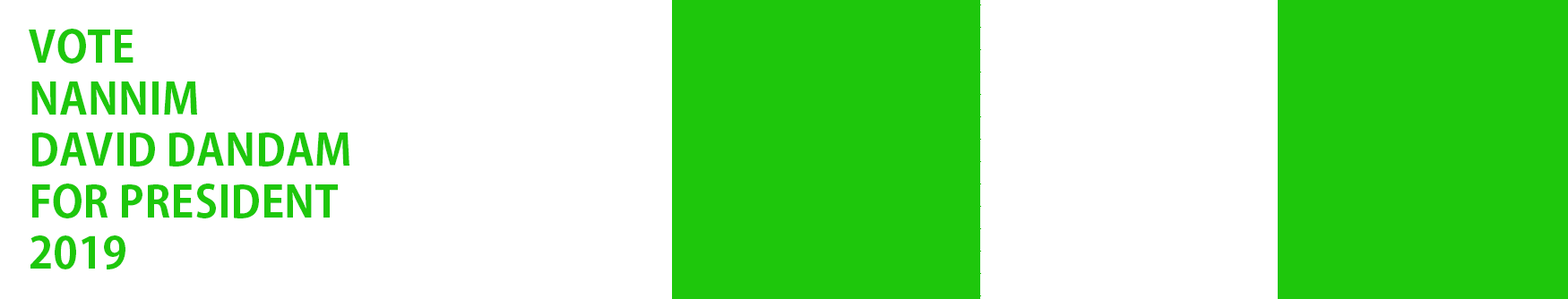
<style>
.page{position:relative;width:1568px;height:299px;background:#ffffff}
.page>*{position:absolute;margin:0}
.t1{font:43px "KozGoPro-Bold";color:#1ec70c}
</style>
<div class="page">
<p class="t1" style="left:29px;top:29px;width:320px;height:241px">VOTE <br>NANNIM <br>DAVID DANDAM<br>FOR PRESIDENT  <br>2019</p>
</div>
